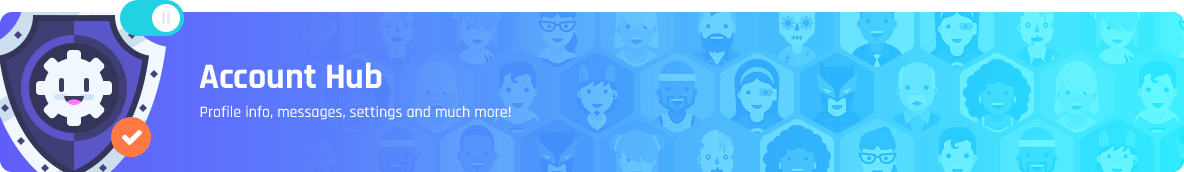
<style>
.page{position:relative;width:1184px;height:172px}
.page>*{position:absolute;margin:0}
.t1{font:36px "Rajdhani-Bold";color:#ffffff}
.t2{font:16px "Rajdhani-Medium";color:#ffffff}
</style>
<div class="page">
<p class="t1" style="left:199px;top:62px;width:183px;height:26px">Account Hub</p>
<p class="t2" style="left:200px;top:105px;width:311px;height:15px">Profile info, messages, settings and much more!</p>
</div>
